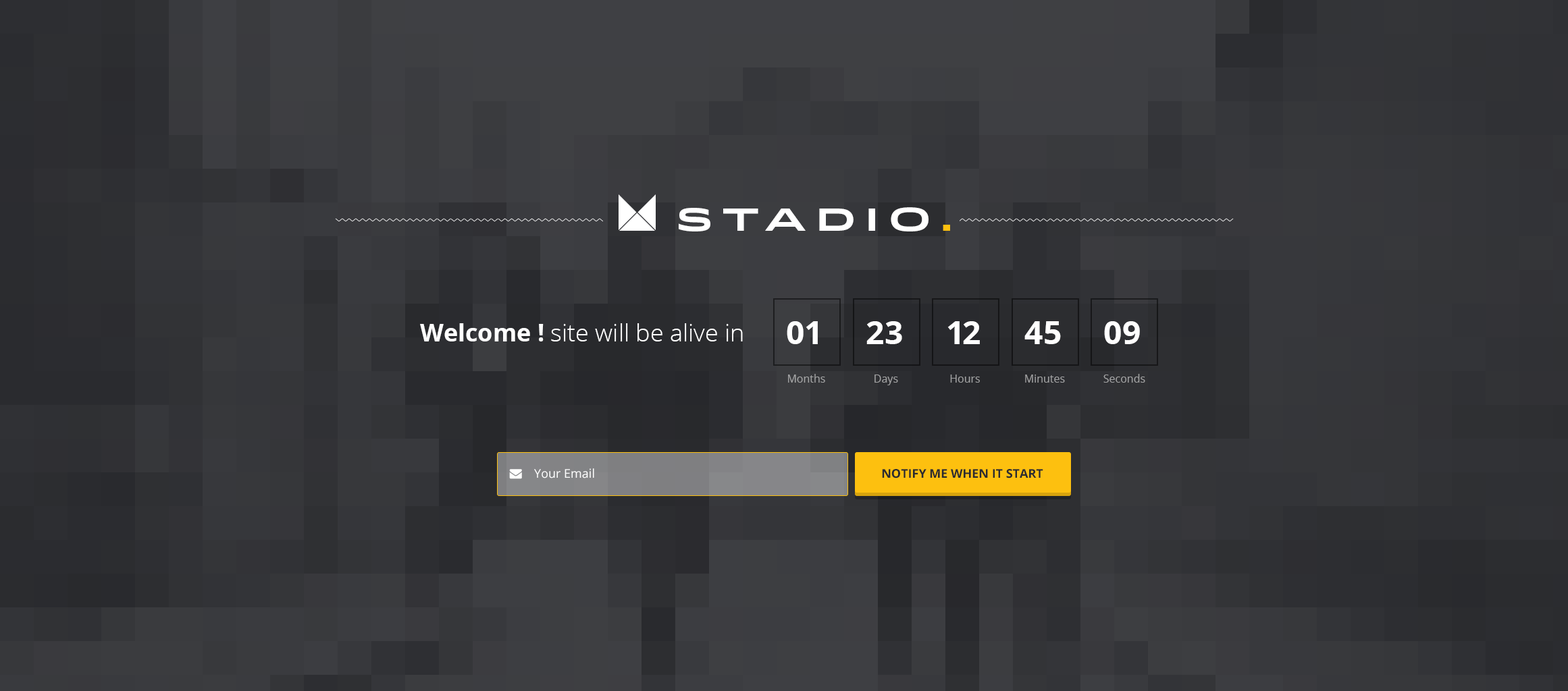
<style>
.page{position:relative;width:1568px;height:691px}
.page>*{position:absolute;margin:0}
.t1{font:32.1px "Idlewild-Bold";letter-spacing:0.3em;color:#ffffff;text-transform:uppercase}
.t2{font:32.1px "Idlewild-Bold";letter-spacing:0.3em;color:#fdc00f;text-transform:uppercase}
.t3{font:24.3px "OpenSans-Light";color:#ffffff}
.t4{font:24.3px "OpenSans-Bold";color:#ffffff}
.t5{font:32.4px "OpenSans-Bold";color:#ffffff;text-transform:uppercase}
.t6{font:10.8px "OpenSans";color:#a5a6a6}
.t7{font:10.8px "OpenSans";color:#a1a2a3}
.t8{font:10.8px "OpenSans";color:#a0a1a2}
.t9{font:10.8px "OpenSans";color:#a2a2a3}
.t10{font:10.8px "OpenSans";color:#a2a3a3}
.t11{font:12.2px "OpenSans";color:#ffffff}
.t12{font:12.2px "OpenSans-Bold";color:#2a2b2f;text-transform:uppercase}
</style>
<div class="page">
<p class="t1" style="left:679px;top:207px;width:271px;height:25px">stAdio<span class="t2">.</span></p>
<p class="t3" style="left:420px;top:323px;width:323px;height:19px"><span class="t4">Welcome !</span> site will be alive in</p>
<p class="t5" style="left:787px;top:321px;width:31px;height:23px">01</p>
<p class="t5" style="left:866px;top:321px;width:36px;height:23px">23</p>
<p class="t5" style="left:947px;top:321px;width:33px;height:23px">12</p>
<p class="t5" style="left:1024px;top:321px;width:37px;height:23px">45</p>
<p class="t5" style="left:1104px;top:321px;width:36px;height:23px">09</p>
<p class="t6" style="left:788px;top:374px;width:37px;height:9px">Months</p>
<p class="t7" style="left:874px;top:375px;width:24px;height:11px">Days</p>
<p class="t8" style="left:950px;top:375px;width:30px;height:8px">Hours</p>
<p class="t9" style="left:1025px;top:375px;width:40px;height:8px">Minutes</p>
<p class="t10" style="left:1103px;top:374px;width:42px;height:9px">Seconds</p>
<p class="t11" style="left:534px;top:469px;width:60px;height:10px">Your Email</p>
<p class="t12" style="left:882px;top:469px;width:161px;height:10px">Notify Me when it start</p>
</div>
